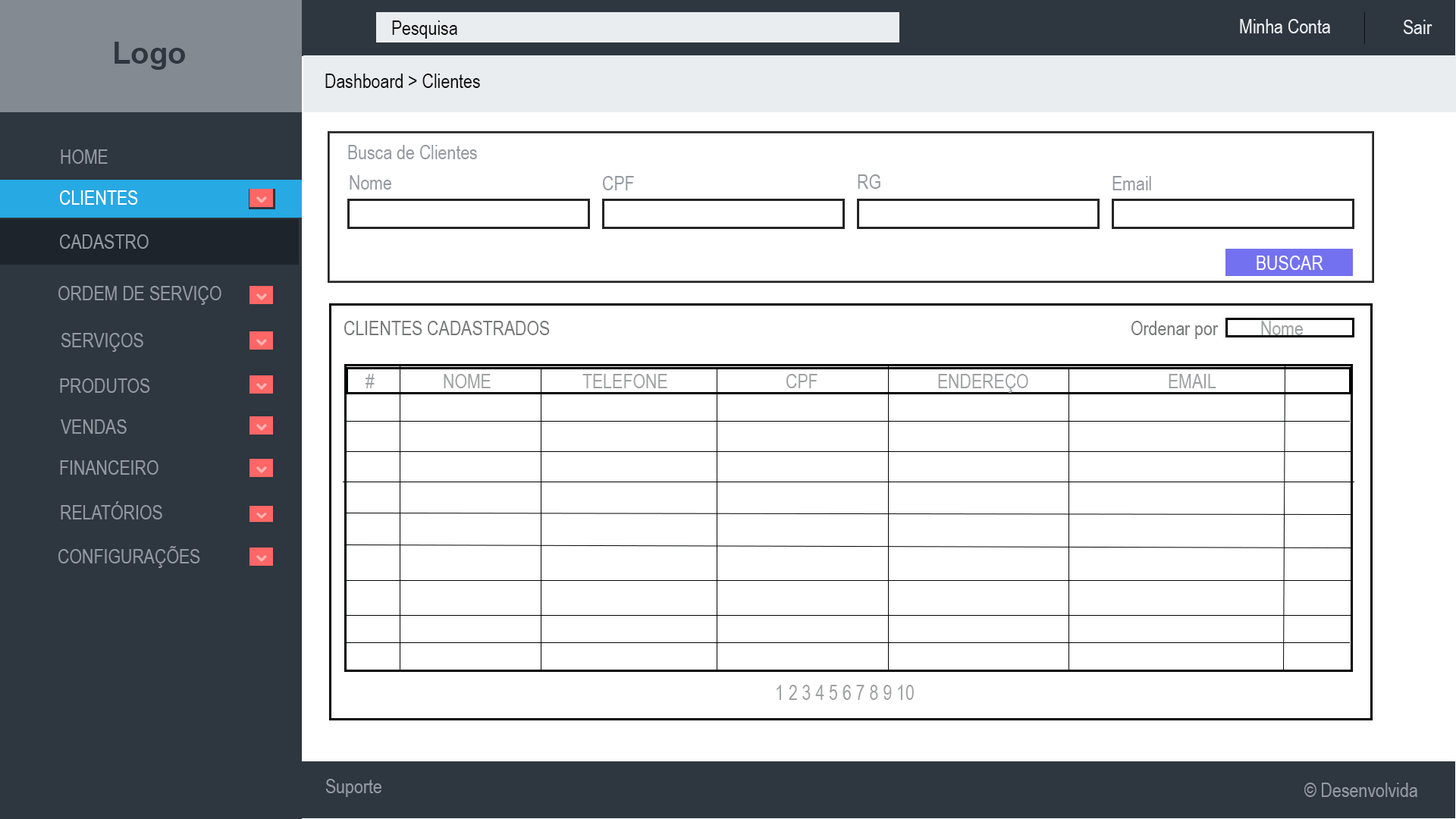
<style>
.page{position:relative;width:1456px;height:819px;background:#ffffff}
.page>*{position:absolute;margin:0}
.t1{font:19.7px "ArialNarrow";color:#0e0f0f}
.t2{font:19.7px "ArialNarrow";color:#eaedf0}
.t3{font:30.3px "Arial-BoldMT";color:#2e363f}
.t4{font:19.7px "ArialNarrow";color:#9399a1}
.t5{font:19.7px "ArialNarrow";color:#ffffff}
.t6{font:19.7px "ArialNarrow";color:#777878}
.t7{font:19.7px "ArialNarrow";color:#9ea0a1}
</style>
<div class="page">
<p class="t1" style="left:392px;top:20px;width:65px;height:19px">Pesquisa</p>
<p class="t2" style="left:1240px;top:19px;width:90px;height:14px">Minha Conta</p>
<p class="t2" style="left:1403px;top:20px;width:29px;height:14px">Sair</p>
<p class="t3" style="left:115px;top:42px;width:70px;height:28px">Logo</p>
<p class="t1" style="left:325px;top:74px;width:155px;height:14px">Dashboard &gt; Clientes</p>
<p class="t4" style="left:61px;top:149px;width:47px;height:15px">HOME</p>
<p class="t4" style="left:348px;top:145px;width:129px;height:14px">Busca de Clientes</p>
<p class="t4" style="left:350px;top:175px;width:41px;height:15px">Nome</p>
<p class="t4" style="left:603px;top:176px;width:31px;height:14px">CPF</p>
<p class="t4" style="left:858px;top:174px;width:22px;height:15px">RG</p>
<p class="t4" style="left:1112px;top:176px;width:39px;height:14px">Email</p>
<p class="t5" style="left:60px;top:190px;width:78px;height:15px">CLIENTES</p>
<p class="t4" style="left:60px;top:234px;width:89px;height:15px">CADASTRO</p>
<p class="t5" style="left:1257px;top:256px;width:66px;height:14px">BUSCAR</p>
<p class="t4" style="left:58px;top:286px;width:163px;height:19px">ORDEM DE SERVIÇO</p>
<p class="t6" style="left:344px;top:321px;width:206px;height:14px">CLIENTES CADASTRADOS</p>
<p class="t6" style="left:1131px;top:321px;width:88px;height:18px">Ordenar por</p>
<p class="t7" style="left:1261px;top:321px;width:42px;height:14px">Nome</p>
<p class="t4" style="left:61px;top:333px;width:82px;height:19px">SERVIÇOS</p>
<p class="t7" style="left:365px;top:374px;width:10px;height:14px">#</p>
<p class="t7" style="left:444px;top:374px;width:47px;height:14px">NOME</p>
<p class="t7" style="left:582px;top:374px;width:85px;height:14px">TELEFONE</p>
<p class="t7" style="left:786px;top:374px;width:31px;height:14px">CPF</p>
<p class="t7" style="left:938px;top:374px;width:90px;height:19px">ENDEREÇO</p>
<p class="t7" style="left:1169px;top:374px;width:47px;height:14px">EMAIL</p>
<p class="t4" style="left:60px;top:378px;width:90px;height:15px">PRODUTOS</p>
<p class="t4" style="left:61px;top:419px;width:66px;height:15px">VENDAS</p>
<p class="t4" style="left:60px;top:460px;width:98px;height:15px">FINANCEIRO</p>
<p class="t4" style="left:61px;top:501px;width:101px;height:18px">RELATÓRIOS</p>
<p class="t4" style="left:58px;top:546px;width:142px;height:22px">CONFIGURAÇÕES</p>
<p class="t7" style="left:777px;top:685px;width:137px;height:15px">1 2 3 4 5 6 7 8 9 10</p>
<p class="t4" style="left:325px;top:779px;width:56px;height:18px">Suporte</p>
<p class="t4" style="left:1304px;top:783px;width:113px;height:14px">© Desenvolvida</p>
</div>
